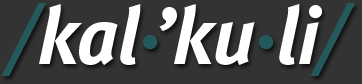
<style>
.page{position:relative;width:362px;height:84px;background:#333333}
.page>*{position:absolute;margin:0}
.t1{font:80px "MetaPro-BoldItalic";color:#ffffff}
.t2{font:80px "MetaPro-BoldItalic";color:#255a5d}
</style>
<div class="page">
<p class="t1" style="left:1px;top:3px;width:355px;height:73px"><span class="t2">/</span>kal<span class="t2">·</span>’ku<span class="t2">·</span>li<span class="t2">/</span></p>
</div>
